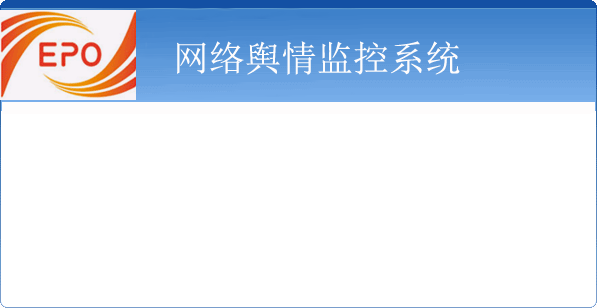
<style>
.page{position:relative;width:597px;height:308px;background:#ffffff}
.page>*{position:absolute;margin:0}
.t1{font:36px "SimSun";color:#fefcfc}
</style>
<div class="page">
<p class="t1" style="left:177px;top:41px;width:283px;height:34px">网络舆情监控系统</p>
</div>
